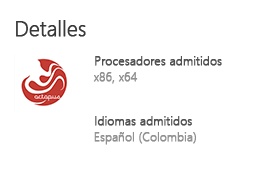
<style>
.page{position:relative;width:270px;height:174px;background:#ffffff}
.page>*{position:absolute;margin:0}
.t1{font:20.7px "SegoeUI-Light";color:#383838;font-weight:bold}
.t2{font:12.1px "SegoeUI-Light";color:#515050;font-weight:bold}
.t3{font:12px "SegoeUI-Light";color:#919090;font-weight:bold}
</style>
<div class="page">
<p class="t1" style="left:16px;top:20px;width:70px;height:17px">Detalles</p>
<p class="t2" style="left:95px;top:56px;width:127px;height:10px">Procesadores admitidos</p>
<p class="t3" style="left:93px;top:72px;width:45px;height:12px">x86, x64</p>
<p class="t2" style="left:95px;top:116px;width:97px;height:10px">Idiomas admitidos</p>
<p class="t3" style="left:94px;top:132px;width:102px;height:13px">Español (Colombia)</p>
</div>
